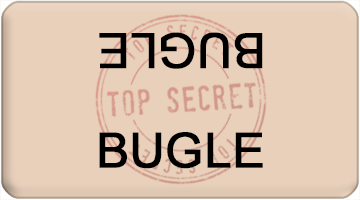
<style>
.page{position:relative;width:360px;height:200px;background:#e8d0bb}
.page>*{position:absolute;margin:0}
.t1{font:48px "ArialMT";color:#000000;font-weight:bold}
</style>
<div class="page">
<p class="t1" style="left:99px;top:32px;width:164px;height:37px;rotate:180deg">BUGLE</p>
<p class="t1" style="left:99px;top:132px;width:164px;height:37px">BUGLE</p>
</div>
